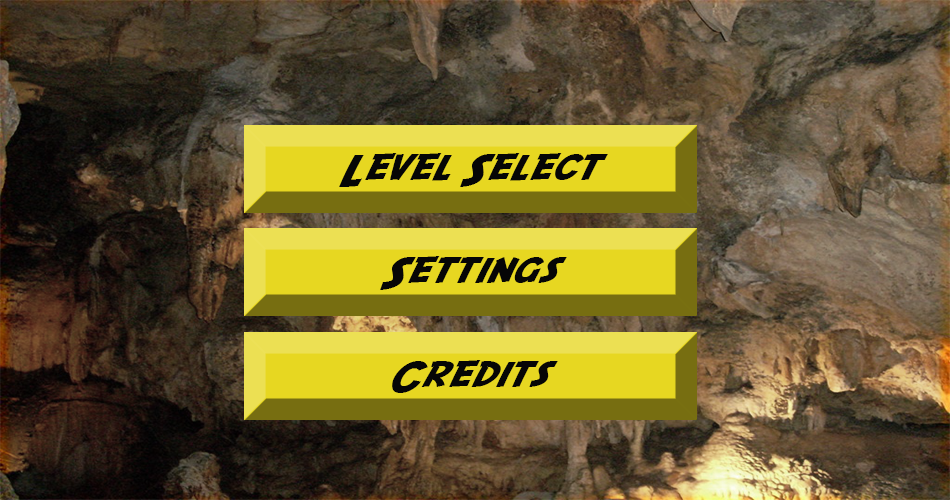
<style>
.page{position:relative;width:950px;height:500px}
.page>*{position:absolute;margin:0}
.t1{font:36px "SFFedora";letter-spacing:-0.005em;color:#060606;scale:1.2 1}
</style>
<div class="page">
<p class="t1" style="left:339px;top:153px;width:269px;height:34px">Level Select</p>
<p class="t1" style="left:380px;top:256px;width:187px;height:34px">Settings</p>
<p class="t1" style="left:392px;top:360px;width:166px;height:33px">Credits</p>
</div>
